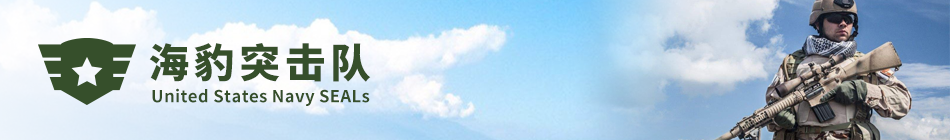
<style>
.page{position:relative;width:950px;height:140px}
.page>*{position:absolute;margin:0}
.t1{font:40.5px "SourceHanSansCN-Heavy";letter-spacing:0.12em;color:#364f2b}
.t2{font:16.7px "SourceHanSansCN-Bold";letter-spacing:0.02em;color:#364f2b}
</style>
<div class="page">
<p class="t1" style="left:149px;top:43px;width:222px;height:39px">海豹突击队</p>
<p class="t2" style="left:152px;top:88px;width:218px;height:18px">United States Navy SEALs</p>
</div>
